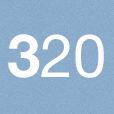
<style>
.page{position:relative;width:114px;height:114px}
.page>*{position:absolute;margin:0}
.t1{font:60px "HelveticaNeue";letter-spacing:-0.005em;color:#ffffff}
.t2{font:60px "HelveticaNeue-Bold";letter-spacing:-0.005em;color:#ffffff}
</style>
<div class="page">
<p class="t1" style="left:8px;top:34px;width:96px;height:44px"><span class="t2">3</span>20</p>
</div>
